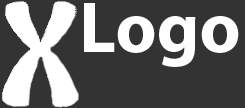
<style>
.page{position:relative;width:245px;height:108px;background:#333333}
.page>*{position:absolute;margin:0}
.t1{font:72px "MyriadPro-Bold";color:#fefefe}
</style>
<div class="page">
<p class="t1" style="left:84px;top:3px;width:155px;height:64px">Logo</p>
</div>
